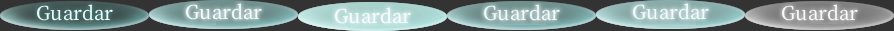
<style>
.page{position:relative;width:894px;height:31px;background:#333333}
.page>*{position:absolute;margin:0}
.t1{font:23px "OfficialFateFont-Medium";color:#edfdfd}
.t2{font:23px "OfficialFateFont-Medium";color:#f5fefe}
.t3{font:23px "OfficialFateFont-Medium";color:#f9f9f9}
</style>
<div class="page">
<p class="t1" style="left:37px;top:4px;width:76px;height:17px">Guardar</p>
<p class="t2" style="left:186px;top:3px;width:76px;height:17px">Guardar</p>
<p class="t1" style="left:484px;top:4px;width:76px;height:17px">Guardar</p>
<p class="t1" style="left:633px;top:3px;width:76px;height:17px">Guardar</p>
<p class="t3" style="left:782px;top:4px;width:76px;height:17px">Guardar</p>
<p class="t2" style="left:335px;top:7px;width:76px;height:17px">Guardar</p>
</div>
